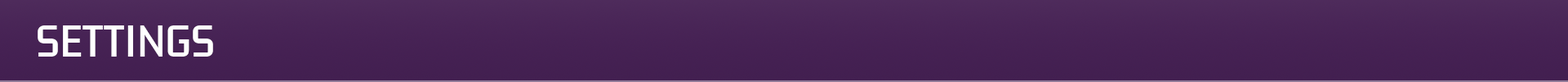
<style>
.page{position:relative;width:1568px;height:82px}
.page>*{position:absolute;margin:0}
.t1{font:39.2px "KdamThmorPro-Regular";color:#ffffff}
</style>
<div class="page">
<p class="t1" style="left:38px;top:25px;width:175px;height:31px">SETTINGS</p>
</div>
